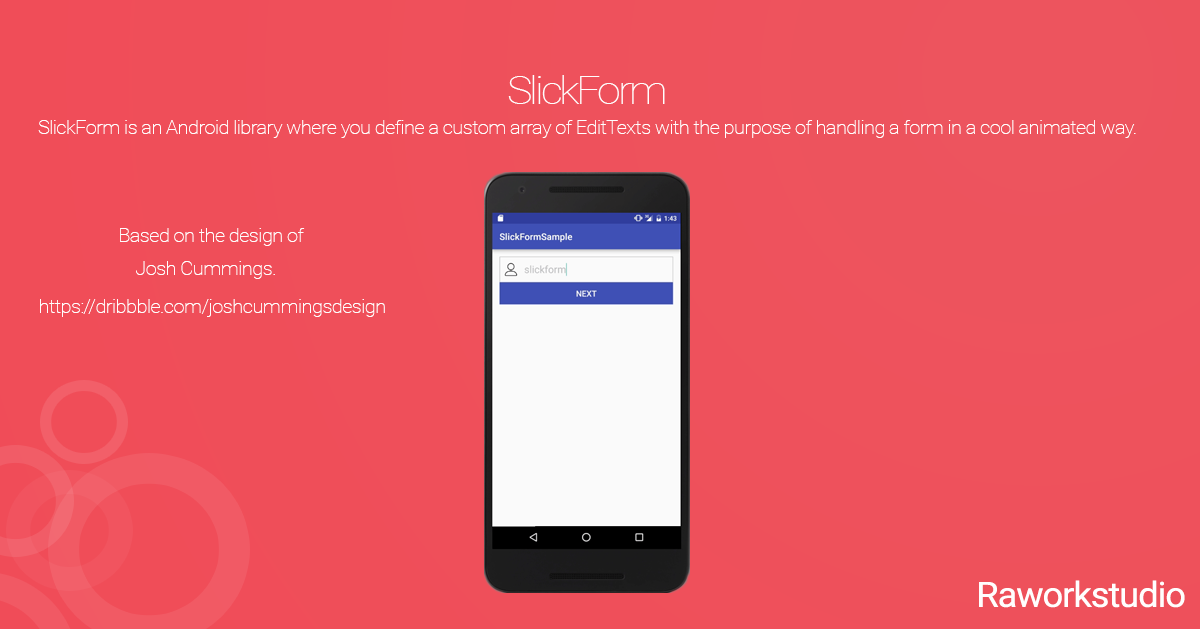
<style>
.page{position:relative;width:1200px;height:629px}
.page>*{position:absolute;margin:0}
.t1{font:38.8px "Roboto-Thin";letter-spacing:-0.07em;color:#fffefe;scale:1.1 1}
.t2{font:19.4px "Roboto-Thin";letter-spacing:-0.03em;color:#fffefe;scale:1.04 1}
.t3{font:19.2px/0px "Roboto-Thin";letter-spacing:-0.03em;color:#fffefe;scale:1.05 1}
.t4{font:19.4px/33.3px "Roboto-Thin";letter-spacing:-0.03em;color:#fffefe;scale:1.04 1}
.t5{font:34.9px "Roboto-Regular";letter-spacing:-0.03em;color:#fffefe;scale:1.04 1}
</style>
<div class="page">
<p class="t1" style="left:508px;top:75px;width:157px;height:29px">SlickForm</p>
<p class="t2" style="left:38px;top:120px;width:1098px;height:18px">SlickForm is an Android library where you define a custom array of EditTexts with the purpose of handling a form in a cool animated way.</p>
<p class="t3" style="left:120px;top:228px;width:185px;height:51px">Based on the design of  <br>    Josh Cummings<span class="t4">.</span></p>
<p class="t2" style="left:40px;top:299px;width:345px;height:18px">https://dribbble.com/joshcummingsdesign</p>
<p class="t5" style="left:979px;top:580px;width:206px;height:28px">Raworkstudio</p>
</div>
